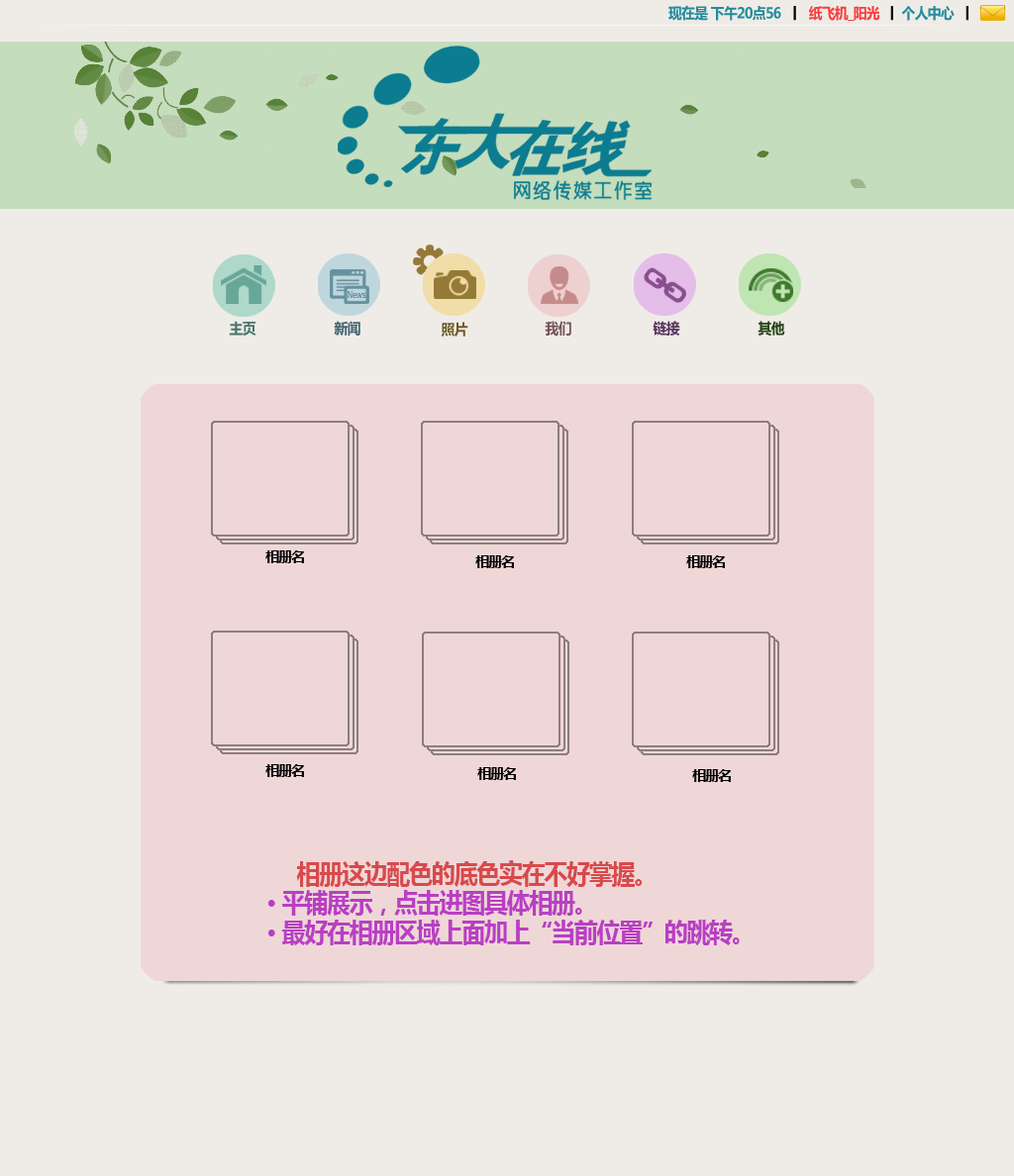
<style>
.page{position:relative;width:1014px;height:1176px;background:#efece7}
.page>*{position:absolute;margin:0}
.t1{font:14.9px "MicrosoftYaHei-Bold";letter-spacing:-0.04em;color:#49746a;scale:0.91 1}
.t2{font:14.9px "MicrosoftYaHei-Bold";letter-spacing:-0.04em;color:#446570;scale:0.91 1}
.t3{font:14.9px "MicrosoftYaHei-Bold";letter-spacing:-0.04em;color:#6e5a27;scale:0.91 1}
.t4{font:14.9px "MicrosoftYaHei-Bold";letter-spacing:-0.04em;color:#765353;scale:0.91 1}
.t5{font:14.9px "MicrosoftYaHei-Bold";letter-spacing:-0.04em;color:#5b355f;scale:0.91 1}
.t6{font:14.9px "MicrosoftYaHei-Bold";letter-spacing:-0.04em;color:#24431a;scale:0.91 1}
.t7{font:14.9px "MicrosoftYaHei-Bold";letter-spacing:-0.04em;color:#000000;scale:0.91 1}
.t8{font:25.7px/29.1px "MicrosoftYaHei-Bold";letter-spacing:-0.04em;color:#b83fc4;scale:0.91 1}
.t9{font:25.7px/29.1px "MicrosoftYaHei-Bold";letter-spacing:-0.04em;color:#d8494c;scale:0.91 1}
</style>
<div class="page">
<p class="t1" style="left:229px;top:321px;width:27px;height:15px">主页</p>
<p class="t2" style="left:334px;top:321px;width:26px;height:15px">新闻</p>
<p class="t3" style="left:441px;top:322px;width:27px;height:15px">照片</p>
<p class="t4" style="left:545px;top:321px;width:26px;height:16px">我们</p>
<p class="t5" style="left:652px;top:321px;width:28px;height:15px">链接</p>
<p class="t6" style="left:757px;top:321px;width:28px;height:16px">其他</p>
<p class="t7" style="left:265px;top:550px;width:39px;height:13px">相册名</p>
<p class="t7" style="left:475px;top:555px;width:39px;height:13px">相册名</p>
<p class="t7" style="left:686px;top:555px;width:39px;height:13px">相册名</p>
<p class="t7" style="left:265px;top:764px;width:39px;height:13px">相册名</p>
<p class="t7" style="left:477px;top:767px;width:39px;height:13px">相册名</p>
<p class="t7" style="left:692px;top:769px;width:39px;height:13px">相册名</p>
<p class="t8" style="left:268px;top:860px;width:472px;height:86px"><span class="t9">     相册这边配色的底色实在不好掌握。<br></span>· 平铺展示，点击进图具体相册。<br>· 最好在相册区域上面加上“当前位置”的跳转。</p>
</div>
